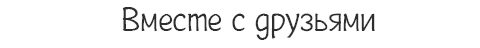
<style>
.page{position:relative;width:480px;height:48px;background:#ffffff}
.page>*{position:absolute;margin:0}
.t1{font:35px "Plainot";color:#2e2e2e}
</style>
<div class="page">
<p class="t1" style="left:122px;top:7px;width:253px;height:33px">Вместе с друзьями</p>
</div>
